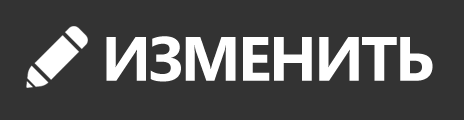
<style>
.page{position:relative;width:464px;height:120px;background:#333333}
.page>*{position:absolute;margin:0}
.t1{font:62.5px "SegoeUI-Bold";letter-spacing:-0.04em;color:#ffffff;text-transform:uppercase}
</style>
<div class="page">
<p class="t1" style="left:106px;top:36px;width:327px;height:46px">изменить</p>
</div>
